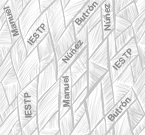
<style>
.page{position:relative;width:145px;height:135px}
.page>*{position:absolute;margin:0}
.t1{font:8.9px "ArialRoundedMTBold";color:#8b8b8b}
</style>
<div class="page">
<p class="t1" style="left:3px;top:6px;width:17px;height:31px;rotate:-110deg">Manuel</p>
<p class="t1" style="left:74px;top:1px;width:24px;height:25px;rotate:-48deg">Butrón</p>
<p class="t1" style="left:103px;top:3px;width:8px;height:28px;rotate:-92deg">Núñez</p>
<p class="t1" style="left:27px;top:23px;width:18px;height:23px;rotate:-52deg">IESTP</p>
<p class="t1" style="left:61px;top:39px;width:23px;height:25px;rotate:-50deg">Núñez</p>
<p class="t1" style="left:112px;top:48px;width:20px;height:23px;rotate:-48deg">IESTP</p>
<p class="t1" style="left:62px;top:76px;width:8px;height:31px;rotate:-92deg">Manuel</p>
<p class="t1" style="left:24px;top:92px;width:8px;height:26px;rotate:-92deg">IESTP</p>
<p class="t1" style="left:107px;top:97px;width:24px;height:25px;rotate:-48deg">Butrón</p>
</div>
